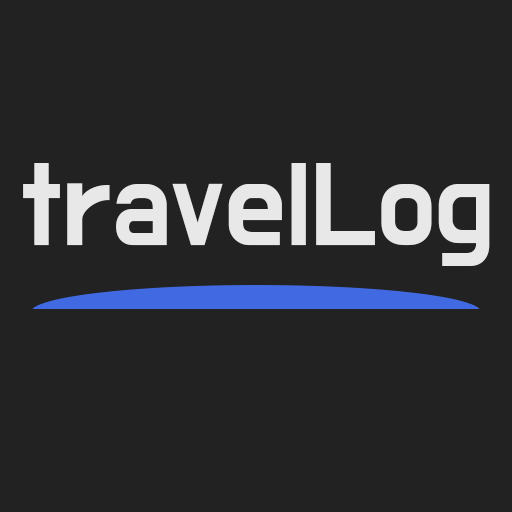
<style>
.page{position:relative;width:512px;height:512px;background:#222222}
.page>*{position:absolute;margin:0}
.t1{font:120px "DoHyeon-Regular";color:#e8e8e8}
</style>
<div class="page">
<p class="t1" style="left:23px;top:163px;width:467px;height:103px">travelLog</p>
</div>
